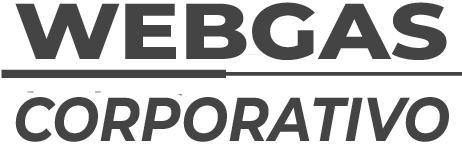
<style>
.page{position:relative;width:462px;height:147px;background:#ffffff}
.page>*{position:absolute;margin:0}
.t1{font:79px "Montserrat-ExtraBold";color:#444444;scale:1.14 1}
.t2{font:61.7px "Montserrat-BoldItalic";color:#444444;scale:0.9 1}
</style>
<div class="page">
<p class="t1" style="left:15px;top:2px;width:432px;height:58px">WEBGAS</p>
<p class="t2" style="left:15px;top:97px;width:434px;height:45px">CORPORATIVO</p>
</div>
